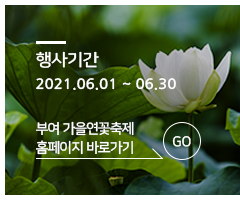
<style>
.page{position:relative;width:240px;height:200px}
.page>*{position:absolute;margin:0}
.t1{font:16.7px "NanumSquare_acB";letter-spacing:-0.01em;color:#ffffff;scale:1.1 1}
.t2{font:13.9px "NanumGothicBold";letter-spacing:-0.01em;color:#ffffff;scale:1.1 1}
.t3{font:13.9px/19.4px "NanumSquare_acB";letter-spacing:-0.01em;color:#ffffff}
.t4{font:13.9px "NanumSquare_acB";letter-spacing:-0.01em;color:#ffffff}
</style>
<div class="page">
<p class="t1" style="left:36px;top:51px;width:63px;height:17px">행사기간</p>
<p class="t2" style="left:36px;top:78px;width:140px;height:12px">2021.06.01 ~ 06.30</p>
<p class="t3" style="left:36px;top:121px;width:98px;height:34px">부여 가을연꽃축제<br>홈페이지 바로가기</p>
<p class="t4" style="left:172px;top:136px;width:19px;height:11px">GO</p>
</div>
